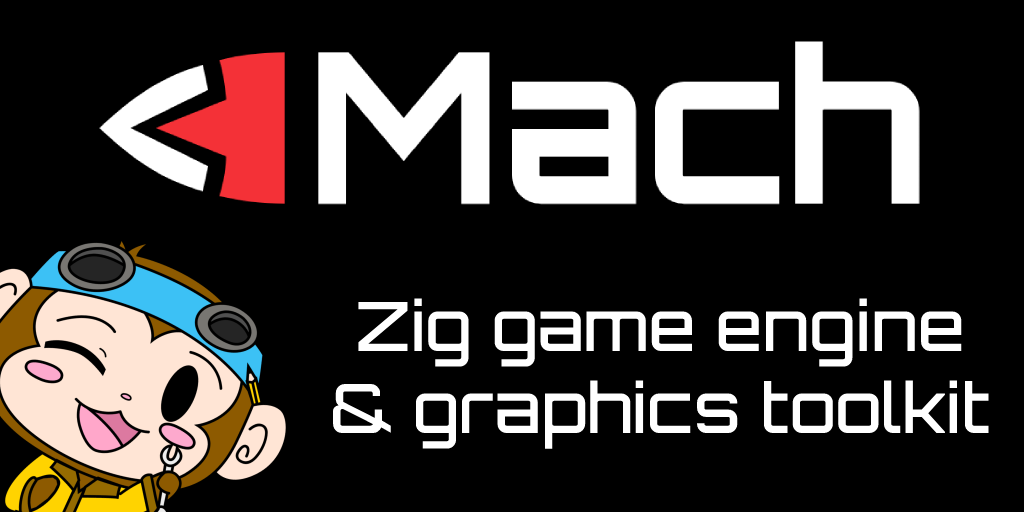
<style>
.page{position:relative;width:1024px;height:512px;background:#000000}
.page>*{position:absolute;margin:0}
.t1{font:68.1px "Orbitron-Medium";color:#ffffff}
</style>
<div class="page">
<p class="t1" style="left:333px;top:298px;width:656px;height:151px;text-align:center">Zig game engine<br>&amp; graphics toolkit</p>
</div>
